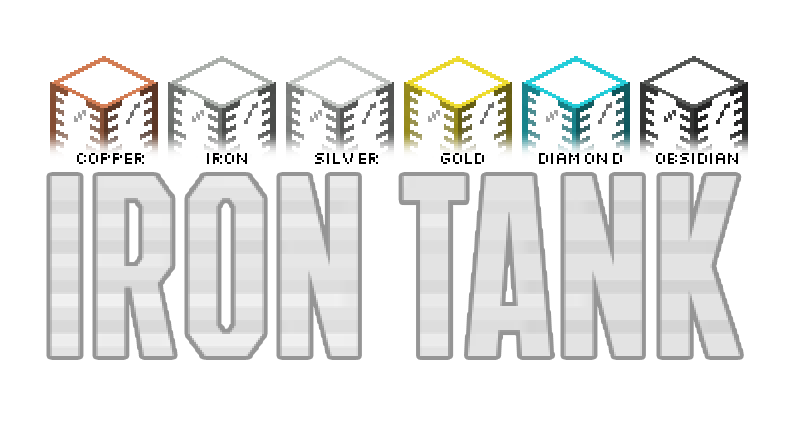
<style>
.page{position:relative;width:793px;height:432px;background:#ffffff}
.page>*{position:absolute;margin:0}
.t1{font:18px "Silkscreen";color:#000000}
</style>
<div class="page">
<p class="t1" style="left:77px;top:153px;width:67px;height:11px">copper</p>
<p class="t1" style="left:207px;top:153px;width:40px;height:11px">iron</p>
<p class="t1" style="left:315px;top:153px;width:63px;height:11px">silver</p>
<p class="t1" style="left:441px;top:153px;width:43px;height:11px">gold</p>
<p class="t1" style="left:539px;top:153px;width:83px;height:11px">diamond</p>
<p class="t1" style="left:656px;top:153px;width:82px;height:11px">obsidian</p>
</div>
